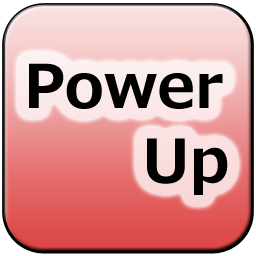
<style>
.page{position:relative;width:256px;height:256px}
.page>*{position:absolute;margin:0}
.t1{font:60px "Meiryo-Bold";color:#000000}
</style>
<div class="page">
<p class="t1" style="left:29px;top:63px;width:194px;height:46px">Power</p>
<p class="t1" style="left:147px;top:138px;width:81px;height:57px">Up</p>
</div>
